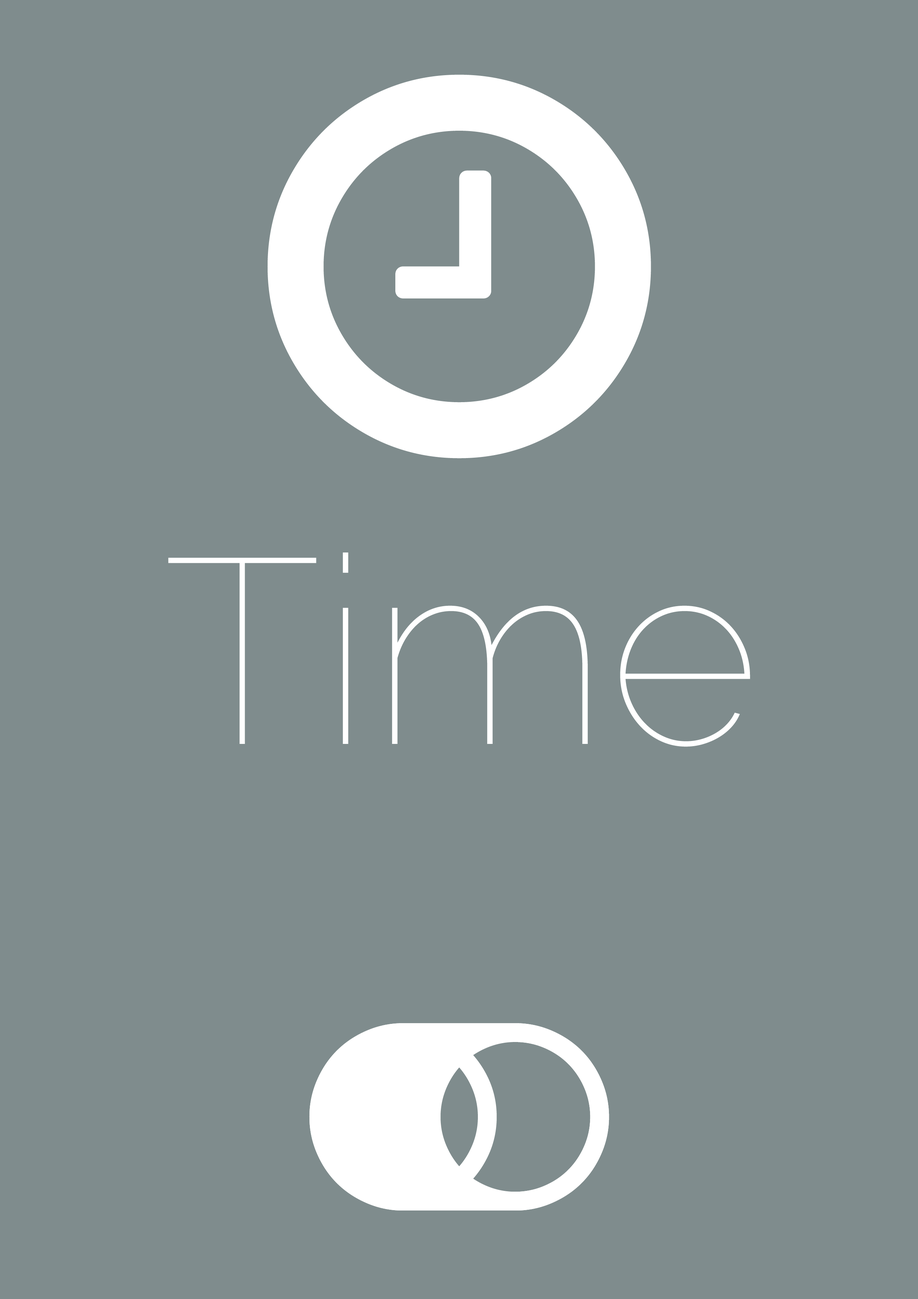
<style>
.page{position:relative;width:918px;height:1299px;background:#7f8c8d}
.page>*{position:absolute;margin:0}
.t1{font:262.2px "Raleway-Thin";color:#ffffff}
</style>
<div class="page">
<p class="t1" style="left:168px;top:552px;width:582px;height:195px">Time</p>
</div>
